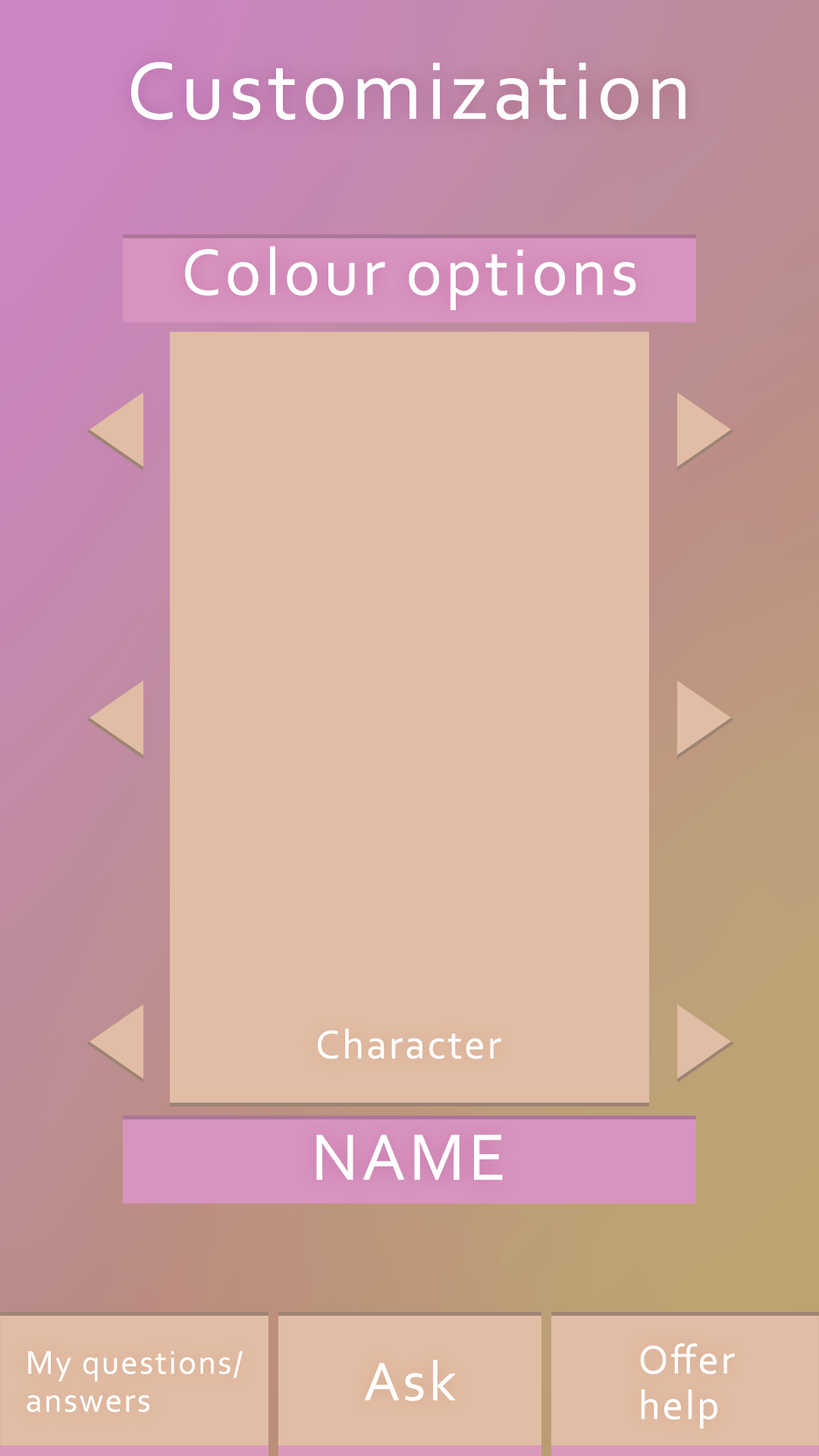
<style>
.page{position:relative;width:819px;height:1456px;background:#e1bda5}
.page>*{position:absolute;margin:0}
.t1{font:85.3px "Corbel";letter-spacing:0.05em;color:#fefefe}
.t2{font:68.2px "Corbel";letter-spacing:0.05em;color:#ffffff}
.t3{font:41.7px "Corbel";letter-spacing:0.05em;color:#ffffff}
.t4{font:41.7px/45.5px "Corbel";letter-spacing:0.05em;color:#ffffff}
.t5{font:34.1px/37.9px "Corbel";letter-spacing:0.05em;color:#ffffff}
.t6{font:56.9px "Corbel";letter-spacing:0.05em;color:#ffffff}
</style>
<div class="page">
<p class="t1" style="left:131px;top:61px;width:555px;height:60px">Customization</p>
<p class="t2" style="left:185px;top:246px;width:451px;height:64px">Colour options</p>
<p class="t3" style="left:318px;top:1028px;width:183px;height:31px">Character</p>
<p class="t2" style="left:316px;top:1134px;width:187px;height:46px">NAME</p>
<p class="t4" style="left:640px;top:1343px;width:95px;height:86px">Offer<br>help</p>
<p class="t5" style="left:27px;top:1351px;width:216px;height:61px">My questions/<br>answers</p>
<p class="t6" style="left:365px;top:1360px;width:91px;height:41px">Ask</p>
</div>
